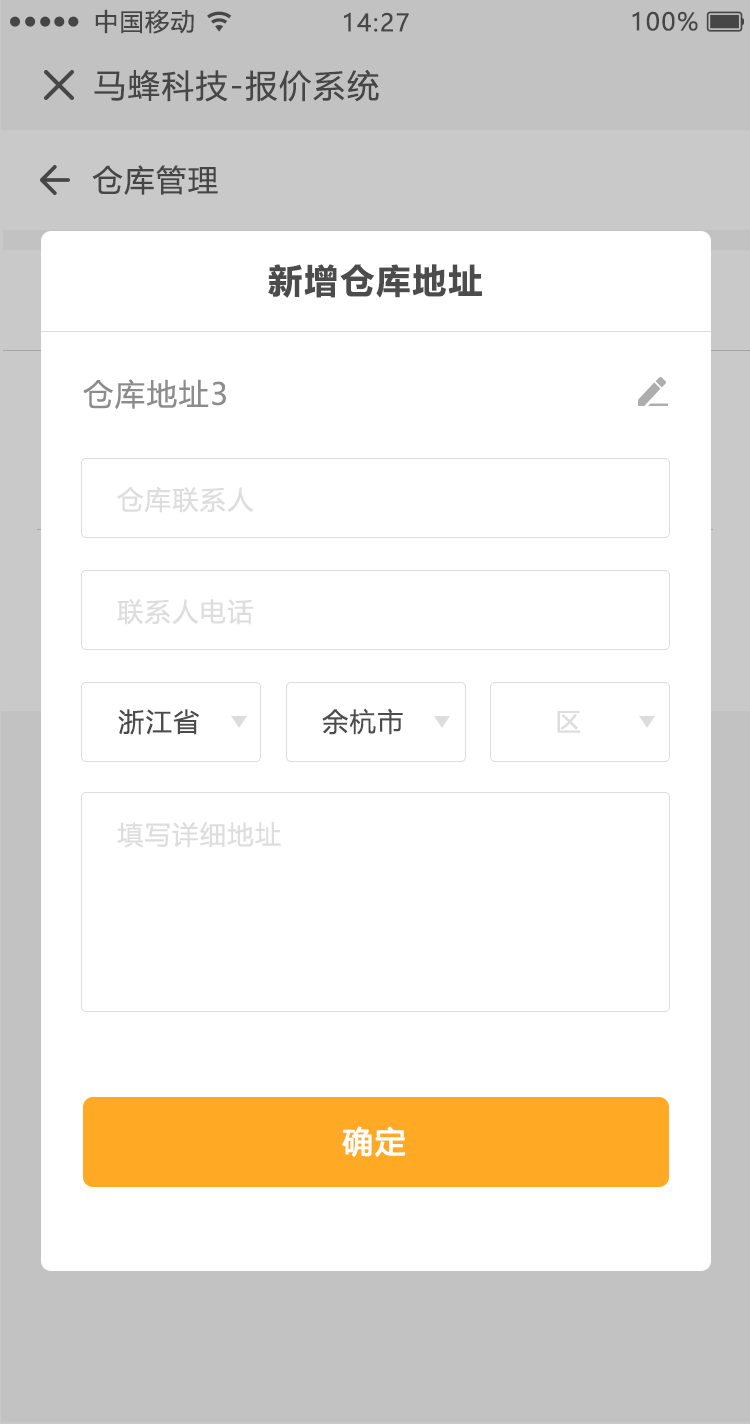
<style>
.page{position:relative;width:750px;height:1424px;background:#ffffff}
.page>*{position:absolute;margin:0}
.t1{font:24px "MicrosoftYaHeiUI";letter-spacing:0.06em;color:#444444}
.t2{font:32px "MicrosoftYaHeiUI";letter-spacing:0.06em;color:#444444}
.t3{font:30px "MicrosoftYaHeiUI";letter-spacing:0.06em;color:#444444}
.t4{font:34px "MicrosoftYaHeiUI-Bold";letter-spacing:0.06em;color:#4c4c4c}
.t5{font:30px "MicrosoftYaHeiUI";letter-spacing:0.06em;color:#8c8c8c}
.t6{font:26px "MicrosoftYaHeiUI";letter-spacing:0.06em;color:#dddddd}
.t7{font:26px "MicrosoftYaHeiUI";letter-spacing:0.06em;color:#4c4c4c}
.t8{font:30px "MicrosoftYaHeiUI";letter-spacing:0.06em;color:#ffffff;font-weight:bold}
</style>
<div class="page">
<p class="t1" style="left:95px;top:9px;width:99px;height:25px">中国移动</p>
<p class="t1" style="left:344px;top:12px;width:65px;height:20px">14:27</p>
<p class="t1" style="left:632px;top:11px;width:66px;height:20px">100%</p>
<p class="t2" style="left:94px;top:69px;width:285px;height:33px">马蜂科技-报价系统</p>
<p class="t3" style="left:92px;top:165px;width:126px;height:30px">仓库管理</p>
<p class="t4" style="left:268px;top:264px;width:214px;height:34px">新增仓库地址</p>
<p class="t5" style="left:83px;top:379px;width:143px;height:30px">仓库地址3</p>
<p class="t6" style="left:117px;top:486px;width:137px;height:27px">仓库联系人</p>
<p class="t6" style="left:117px;top:599px;width:136px;height:26px">联系人电话</p>
<p class="t7" style="left:118px;top:709px;width:81px;height:26px">浙江省</p>
<p class="t7" style="left:322px;top:708px;width:81px;height:27px">余杭市</p>
<p class="t6" style="left:557px;top:711px;width:23px;height:22px">区</p>
<p class="t6" style="left:117px;top:822px;width:164px;height:26px">填写详细地址</p>
<p class="t8" style="left:342px;top:1126px;width:64px;height:31px">确定</p>
</div>
